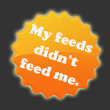
<style>
.page{position:relative;width:110px;height:110px;background:#333333}
.page>*{position:absolute;margin:0}
.t1{font:15px "CopperBlack";color:#ffffff}
</style>
<div class="page">
<p class="t1" style="left:19px;top:24px;width:74px;height:62px;text-align:center;rotate:18deg">My feeds<br>didn't<br>feed me.</p>
</div>
